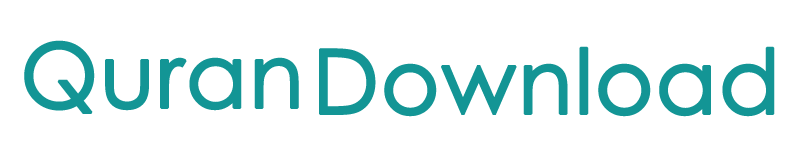
<style>
.page{position:relative;width:800px;height:161px;background:#ffffff}
.page>*{position:absolute;margin:0}
.t1{font:89px "LevenimMT";color:#139595;font-weight:bold}
</style>
<div class="page">
<p class="t1" style="left:24px;top:40px;width:275px;height:74px">Quran</p>
<p class="t1" style="left:319px;top:46px;width:456px;height:71px">Download</p>
</div>
